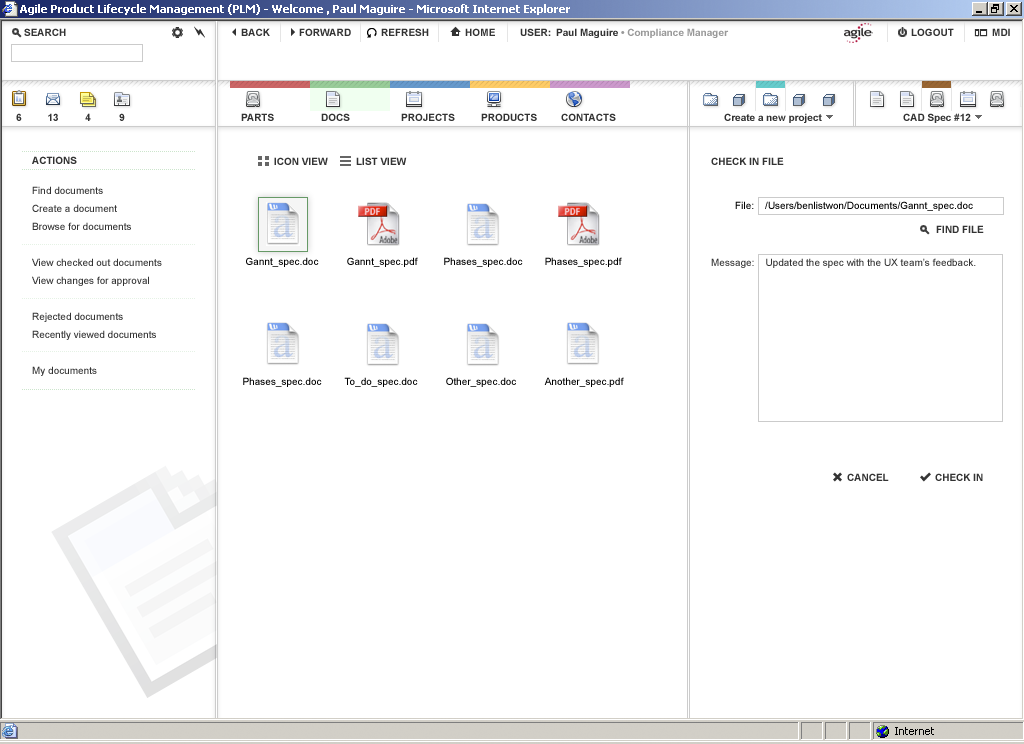
<style>
.page{position:relative;width:1024px;height:744px;background:#ffffff}
.page>*{position:absolute;margin:0}
.t1{font:10px "Arial-BoldMT";color:#333333}
.t2{font:10px "Arial-BoldMT";color:#333333;text-transform:uppercase}
.t3{font:10px/18px "ArialMT";color:#333333}
.t4{font:10px "ArialMT";color:#000000}
.t5{font:10px "ArialMT";color:#333333}
</style>
<div class="page">
<p class="t1" style="left:32px;top:156px;width:45px;height:8px">ACTIONS</p>
<p class="t1" style="left:274px;top:157px;width:54px;height:8px">ICON VIEW</p>
<p class="t1" style="left:356px;top:157px;width:51px;height:8px">LIST VIEW</p>
<p class="t2" style="left:711px;top:157px;width:73px;height:8px">check in File</p>
<p class="t3" style="left:32px;top:186px;width:130px;height:190px">Find documents<br>Create a document<br>Browse for documents<br><br>View checked out documents<br>View changes for approval<br><br>Rejected documents<br>Recently viewed documents<br><br>My documents</p>
<p class="t4" style="left:735px;top:201px;width:238px;height:10px">File:    /Users/benlistwon/Documents/Gannt_spec.doc</p>
<p class="t1" style="left:936px;top:225px;width:48px;height:8px">FIND FILE</p>
<p class="t4" style="left:246px;top:257px;width:73px;height:10px">Gannt_spec.doc</p>
<p class="t4" style="left:347px;top:257px;width:71px;height:10px">Gannt_spec.pdf</p>
<p class="t4" style="left:444px;top:257px;width:79px;height:10px">Phases_spec.doc</p>
<p class="t4" style="left:545px;top:257px;width:77px;height:10px">Phases_spec.pdf</p>
<p class="t5" style="left:711px;top:258px;width:265px;height:10px">Message:    Updated the spec with the UX team’s feedback.</p>
<p class="t4" style="left:243px;top:377px;width:79px;height:10px">Phases_spec.doc</p>
<p class="t4" style="left:344px;top:377px;width:74px;height:10px">To_do_spec.doc</p>
<p class="t4" style="left:446px;top:377px;width:70px;height:10px">Other_spec.doc</p>
<p class="t4" style="left:544px;top:377px;width:80px;height:10px">Another_spec.pdf</p>
<p class="t1" style="left:847px;top:473px;width:42px;height:8px">CANCEL</p>
<p class="t1" style="left:935px;top:473px;width:48px;height:8px">CHECK IN</p>
</div>
